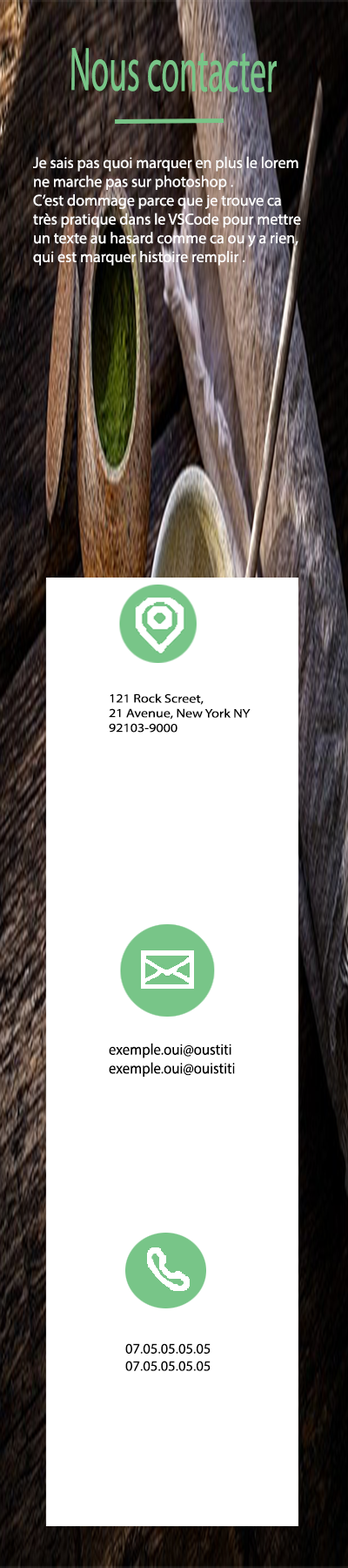
<style>
.page{position:relative;width:348px;height:1568px;background:#ffffff}
.page>*{position:absolute;margin:0}
.t1{font:62.1px "MyriadPro-Regular";color:#78c588;scale:0.53 1}
.t2{font:15.7px "MyriadPro-Regular";color:#fefefe}
.t3{font:12.2px "MyriadPro-Regular";color:#000000;scale:1.14 1}
.t4{font:15.7px "MyriadPro-Regular";color:#000000;scale:0.93 1}
.t5{font:14.4px "MyriadPro-Regular";color:#000000}
</style>
<div class="page">
<p class="t1" style="left:71px;top:48px;width:206px;height:44px;rotate:1deg">Nous contacter</p>
<p class="t2" style="left:33px;top:156px;width:268px;height:110px">Je sais pas quoi marquer en plus le lorem ne marche pas sur photoshop .<br>C’est dommage parce que je trouve ca très pratique dans le VSCode pour mettre un texte au hasard comme ca ou y a rien, qui est marquer histoire remplir .</p>
<p class="t3" style="left:109px;top:693px;width:142px;height:40px">121 Rock Screet, <br>21 Avenue, New York NY<br>92103-9000</p>
<p class="t4" style="left:109px;top:1043px;width:126px;height:34px">exemple.oui@oustiti<br>exemple.oui@ouistiti</p>
<p class="t5" style="left:125px;top:1343px;width:86px;height:28px">07.05.05.05.05<br>07.05.05.05.05</p>
</div>
